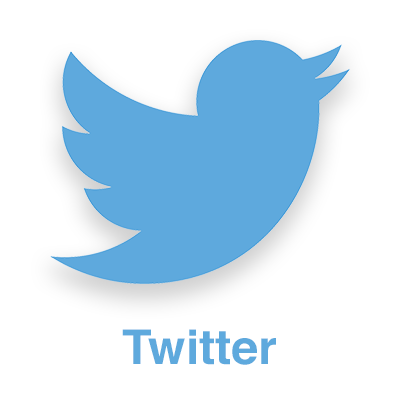
<style>
.page{position:relative;width:400px;height:400px;background:#ffffff}
.page>*{position:absolute;margin:0}
.t1{font:48px "Helvetica-Bold";color:#5ea9dd}
</style>
<div class="page">
<p class="t1" style="left:122px;top:329px;width:154px;height:36px">Twitter</p>
</div>
